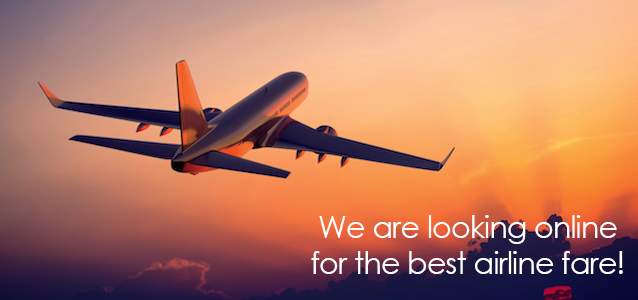
<style>
.page{position:relative;width:638px;height:300px}
.page>*{position:absolute;margin:0}
.t1{font:30px "CenturyGothic";letter-spacing:-0.025em;color:#ffffff}
</style>
<div class="page">
<p class="t1" style="left:311px;top:215px;width:312px;height:59px;text-align:center">We are looking online<br>for the best airline fare!</p>
</div>
